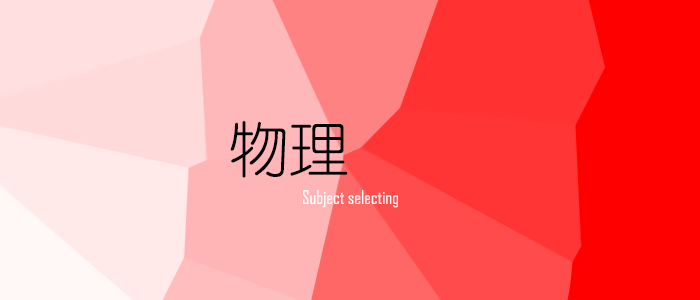
<style>
.page{position:relative;width:700px;height:300px}
.page>*{position:absolute;margin:0}
.t1{font:60px "YouYuan";color:#000000}
.t2{font:18px "AgencyFB-Reg";color:#ffffff}
</style>
<div class="page">
<p class="t1" style="left:230px;top:121px;width:118px;height:57px">物理</p>
<p class="t2" style="left:303px;top:190px;width:95px;height:18px">Subject selecting</p>
</div>
